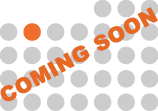
<style>
.page{position:relative;width:158px;height:111px;background:#ffffff}
.page>*{position:absolute;margin:0}
.t1{font:20.8px "Arial-Black";color:#e56825;font-weight:bold}
</style>
<div class="page">
<p class="t1" style="left:0px;top:7px;width:158px;height:95px;rotate:-29deg">COMING SOON</p>
</div>
